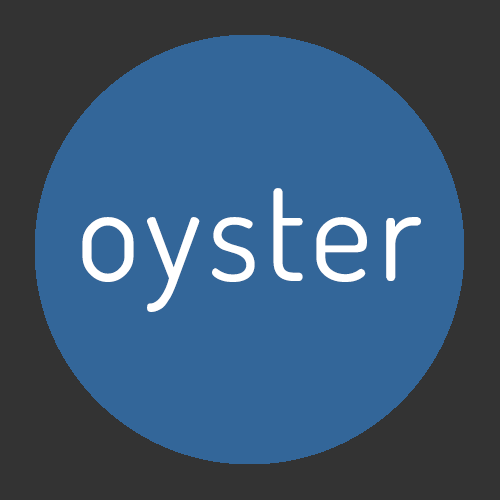
<style>
.page{position:relative;width:500px;height:500px;background:#336699}
.page>*{position:absolute;margin:0}
.t1{font:133px "Dosis-Regular";letter-spacing:0.05em;color:#ffffff}
</style>
<div class="page">
<p class="t1" style="left:82px;top:188px;width:339px;height:124px">oyster</p>
</div>
